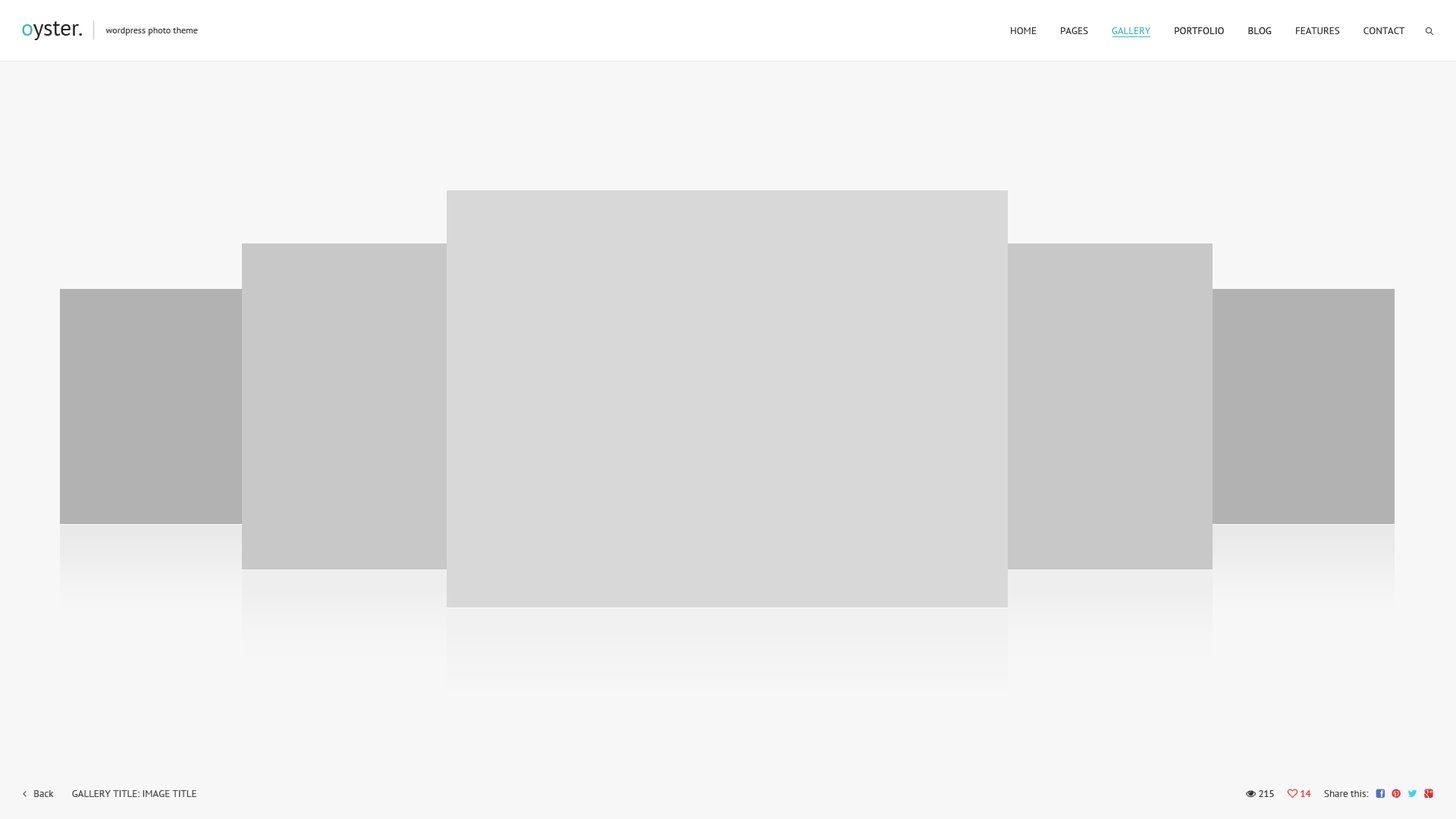
<style>
.page{position:relative;width:1456px;height:819px;background:#f7f7f7}
.page>*{position:absolute;margin:0}
.t1{font:9.1px "PTSans-Regular";color:#434343}
.t2{font:9.9px "PTSans-Regular";color:#343434;text-transform:uppercase}
.t3{font:9.9px "PTSans-Regular";color:#40b7b8;text-transform:uppercase}
.t4{font:9.9px "PTSans-Regular";color:#222222;text-transform:uppercase}
.t5{font:9.9px "PTSans-Regular";color:#444444;text-transform:uppercase}
</style>
<div class="page">
<p class="t1" style="left:105px;top:27px;width:93px;height:9px">wordpress photo theme</p>
<p class="t2" style="left:1011px;top:27px;width:394px;height:7px">Home         Pages         <span class="t3">Gallery         </span><span class="t4">Portfolio         Blog         </span>Features         Contact</p>
<p class="t5" style="left:72px;top:790px;width:124px;height:7px">Gallery Title: Image Title</p>
</div>
